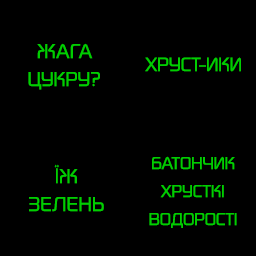
<style>
.page{position:relative;width:256px;height:256px;background:#000000}
.page>*{position:absolute;margin:0}
.t1{font:20.9px/28px "DigitalSansNowMLPro-Reg";letter-spacing:-0.05em;color:#00ce00}
.t2{font:20.9px/28px "DigitalSansNowMLPro-Reg";letter-spacing:-0.025em;color:#00ce00}
.t3{font:20px "DigitalSansNowMLPro-Reg";letter-spacing:-0.05em;color:#00ce00}
.t4{font:18px/28px "DigitalSansNowMLPro-Reg";letter-spacing:-0.05em;color:#00ce00}
</style>
<div class="page">
<p class="t1" style="left:28px;top:43px;width:72px;height:47px;text-align:center"><span class="t2">ЖАГА<br></span>ЦУКРУ?</p>
<p class="t3" style="left:145px;top:57px;width:96px;height:15px">ХРУСТ-ИКИ</p>
<p class="t4" style="left:149px;top:156px;width:88px;height:72px;text-align:center">БАТОНЧИК<br>ХРУСТКІ<br>ВОДОРОСТІ</p>
<p class="t2" style="left:29px;top:164px;width:75px;height:48px;text-align:center">ЇЖ<br>ЗЕЛЕНЬ</p>
</div>
